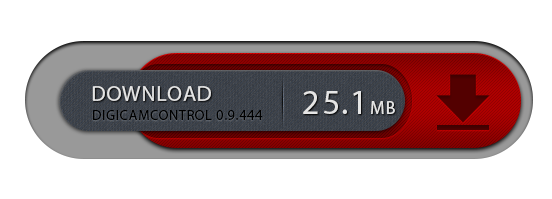
<style>
.page{position:relative;width:552px;height:199px;background:#ffffff}
.page>*{position:absolute;margin:0}
.t1{font:22px "MyriadPro-Regular";letter-spacing:0.025em;color:#e5e5e5;text-transform:uppercase}
.t2{font:35px "MyriadPro-Regular";letter-spacing:0.05em;color:#e5e5e5}
.t3{font:18px "MyriadPro-Regular";letter-spacing:0.05em;color:#e5e5e5}
.t4{font:14px "MyriadPro-Regular";letter-spacing:0.05em;color:#000000;text-transform:uppercase}
</style>
<div class="page">
<p class="t1" style="left:92px;top:86px;width:119px;height:15px">download</p>
<p class="t2" style="left:303px;top:91px;width:92px;height:23px">25.1<span class="t3">MB</span></p>
<p class="t4" style="left:93px;top:110px;width:170px;height:10px">digicamcontrol 0.9.444</p>
</div>
